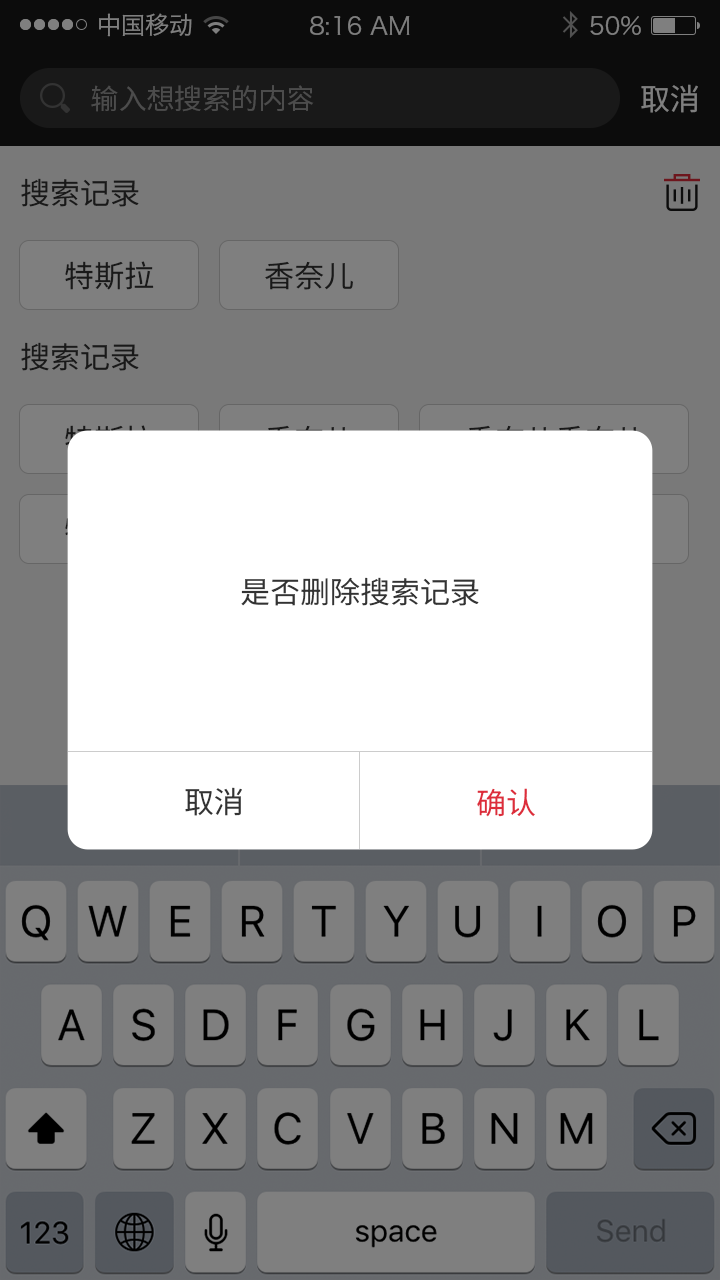
<style>
.page{position:relative;width:720px;height:1280px;background:#ffffff}
.page>*{position:absolute;margin:0}
.t1{font:24px "HiraginoSansGB-W3";color:#7f7f7f}
.t2{font:28px "NotoSansHans-Regular";color:#4c4c4c}
.t3{font:30px "NotoSansHans-Regular";color:#7f7f7f}
.t4{font:30px "NotoSansHans-Regular";color:#191919}
.t5{font:30px "NotoSansHans-Regular";color:#333333}
.t6{font:30px "NotoSansHans-Regular";color:#dd2d3b}
</style>
<div class="page">
<p class="t1" style="left:99px;top:13px;width:93px;height:24px">中国移动</p>
<p class="t1" style="left:310px;top:16px;width:100px;height:19px">8:16 AM</p>
<p class="t1" style="left:590px;top:16px;width:51px;height:19px">50%</p>
<p class="t2" style="left:91px;top:85px;width:223px;height:27px">输入想搜索的内容</p>
<p class="t3" style="left:641px;top:84px;width:57px;height:29px">取消</p>
<p class="t4" style="left:21px;top:178px;width:118px;height:29px">搜索记录</p>
<p class="t4" style="left:65px;top:261px;width:89px;height:29px">特斯拉</p>
<p class="t4" style="left:265px;top:261px;width:88px;height:29px">香奈儿</p>
<p class="t4" style="left:21px;top:342px;width:118px;height:29px">搜索记录</p>
<p class="t5" style="left:241px;top:577px;width:238px;height:29px">是否删除搜索记录</p>
<p class="t5" style="left:185px;top:787px;width:57px;height:29px">取消</p>
<p class="t6" style="left:477px;top:788px;width:58px;height:29px">确认</p>
</div>
